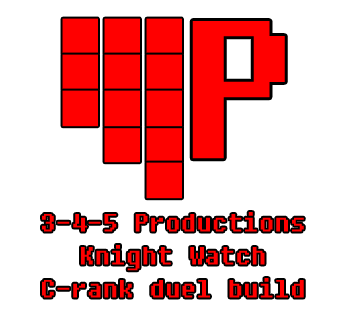
<style>
.page{position:relative;width:337px;height:318px;background:#ffffff}
.page>*{position:absolute;margin:0}
.t1{font:195px "Fixedsys";color:#ff0000}
.t2{font:25px/33px "Fixedsys";color:#ff0000}
</style>
<div class="page">
<p class="t1" style="left:192px;top:21px;width:93px;height:138px">P</p>
<p class="t2" style="left:42px;top:212px;width:262px;height:86px;text-align:center">3-4-5 Productions<br>Knight Watch<br>C-rank duel build</p>
</div>
